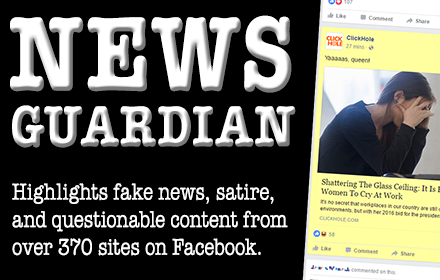
<style>
.page{position:relative;width:440px;height:280px;background:#000000}
.page>*{position:absolute;margin:0}
.t1{font:106.4px "Editor-Bold";color:#ffffff;text-transform:uppercase;scale:0.8 1}
.t2{font:58px "Editor-Bold";text-transform:uppercase;scale:0.8 1}
.t3{font:23px "Editor-";color:#ffffff;scale:0.8 1}
</style>
<div class="page">
<p class="t1" style="left:10px;top:15px;width:282px;height:78px">News</p>
<p class="t2" style="left:12px;top:105px;width:284px;height:43px">Guardian</p>
<p class="t3" style="left:12px;top:183px;width:276px;height:73px">Highlights fake news, satire, <br>and questionable content from <br>over 370 sites on Facebook.</p>
</div>
